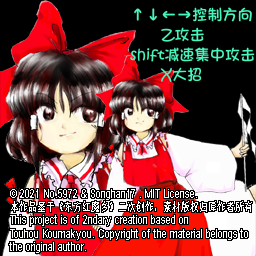
<style>
.page{position:relative;width:256px;height:256px;background:#000000}
.page>*{position:absolute;margin:0}
.t1{font:11.9px/13.2px "ArialMT";color:#ffffff;scale:0.76 1}
.t2{font:11.9px/13.2px "SimSun";color:#ffffff;scale:0.76 1}
</style>
<div class="page">
<p class="t1" style="left:9px;top:189px;width:243px;height:64px">© 2021 No.5972 &amp; Songhan17 . MIT License.<br><span class="t2">本作品基于《东方红魔乡》二次创作，素材版权归原作者所有<br></span>This project is of 2ndary creation based on <br>Touhou Koumakyou. Copyright of the material belongs to<br>the original author.</p>
</div>
